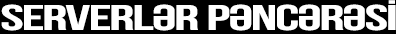
<style>
.page{position:relative;width:396px;height:34px;background:#000000}
.page>*{position:absolute;margin:0}
.t1{font:35.7px "BebasNeue-Bold";letter-spacing:-0.021em;color:#ffffff;scale:1.75 1}
</style>
<div class="page">
<p class="t1" style="left:1px;top:0px;width:395px;height:31px">SERVERLƏR PƏNCƏRƏSİ</p>
</div>
